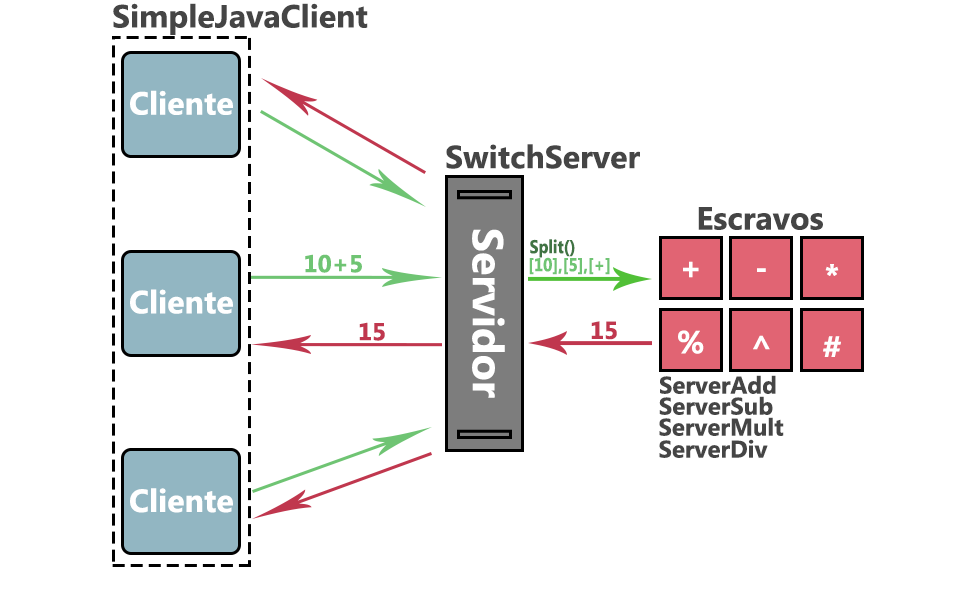
<style>
.page{position:relative;width:976px;height:600px;background:#ffffff}
.page>*{position:absolute;margin:0}
.t1{font:32px "Ebrima-Bold";color:#454545}
.t2{font:32px "Ebrima-Bold";color:#ffffff}
.t3{font:43px "Ebrima-Bold";color:#ffffff}
.t4{font:18.6px "Ebrima-Bold";color:#407443;scale:0.86 1}
.t5{font:24.5px "Ebrima-Bold";color:#6fc473}
.t6{font:18.6px "Ebrima-Bold";color:#6fc473;scale:0.86 1}
.t7{font:24.5px "Ebrima-Bold";color:#c0374e}
.t8{font:24px "Ebrima-Bold";color:#454545}
</style>
<div class="page">
<p class="t1" style="left:113px;top:3px;width:255px;height:32px">SimpleJavaClient</p>
<p class="t2" style="left:130px;top:90px;width:103px;height:25px">Cliente</p>
<p class="t1" style="left:446px;top:144px;width:194px;height:25px">SwitchServer</p>
<p class="t1" style="left:698px;top:207px;width:125px;height:23px">Escravos</p>
<p class="t3" style="left:472px;top:229px;width:33px;height:169px;rotate:90deg">Servidor</p>
<p class="t4" style="left:530px;top:239px;width:45px;height:19px">Split()</p>
<p class="t5" style="left:305px;top:254px;width:57px;height:19px">10+5</p>
<p class="t6" style="left:529px;top:257px;width:81px;height:18px">[10],[5],[+]</p>
<p class="t2" style="left:683px;top:261px;width:16px;height:17px">+</p>
<p class="t2" style="left:757px;top:268px;width:9px;height:4px">-</p>
<p class="t2" style="left:825px;top:264px;width:14px;height:12px">*</p>
<p class="t2" style="left:130px;top:289px;width:103px;height:25px">Cliente</p>
<p class="t7" style="left:359px;top:322px;width:26px;height:19px">15</p>
<p class="t7" style="left:591px;top:321px;width:26px;height:19px">15</p>
<p class="t2" style="left:678px;top:330px;width:26px;height:24px">%</p>
<p class="t2" style="left:753px;top:335px;width:17px;height:15px">^</p>
<p class="t2" style="left:823px;top:336px;width:18px;height:21px">#</p>
<p class="t8" style="left:660px;top:375px;width:116px;height:19px">ServerAdd</p>
<p class="t8" style="left:659px;top:396px;width:114px;height:19px">ServerSub</p>
<p class="t8" style="left:659px;top:417px;width:125px;height:19px">ServerMult</p>
<p class="t8" style="left:659px;top:439px;width:109px;height:19px">ServerDiv</p>
<p class="t2" style="left:130px;top:488px;width:103px;height:25px">Cliente</p>
</div>
